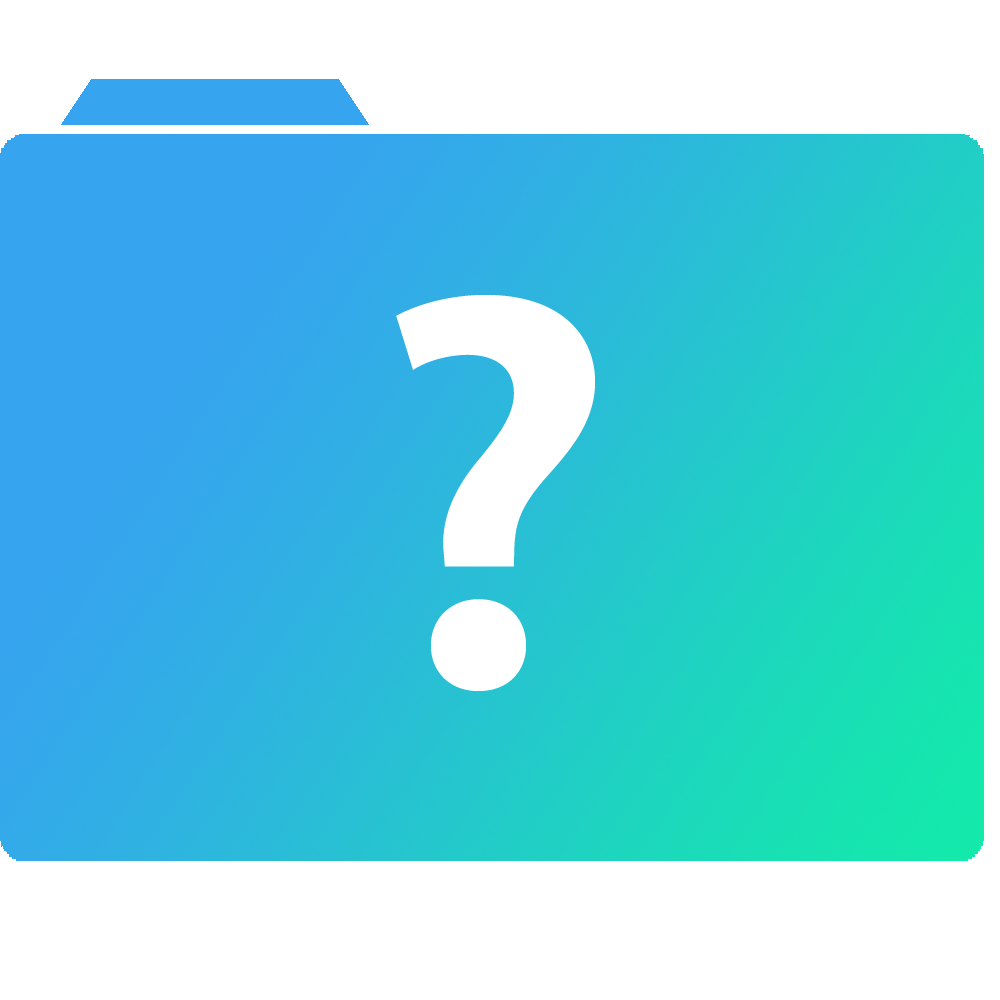
<style>
.page{position:relative;width:1000px;height:1000px;background:#ffffff}
.page>*{position:absolute;margin:0}
.t1{font:498.3px "AdobeGothicStd-Bold";color:#ffffff;scale:1.08 1}
</style>
<div class="page">
<p class="t1" style="left:396px;top:295px;width:199px;height:396px">?</p>
</div>
